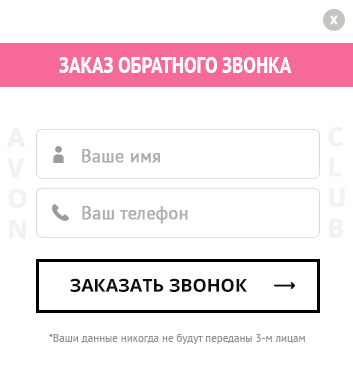
<style>
.page{position:relative;width:353px;height:383px;background:#ffffff}
.page>*{position:absolute;margin:0}
.t1{font:13px "Calibri-Bold";color:#ffffff;font-weight:bold}
.t2{font:23px "PTSans-NarrowBold";color:#ffffff;text-transform:uppercase}
.t3{font:25.4px "OpenSans-Bold";letter-spacing:-0.13em;color:#f2f2f2;font-weight:bold}
.t4{font:18px "PTSans-Regular";color:#aeaeae;font-weight:bold}
.t5{font:18px "OpenSans-Bold";color:#0e0e0e;text-transform:uppercase}
.t6{font:11px "PTSans-Regular";color:#919191}
</style>
<div class="page">
<p class="t1" style="left:330px;top:15px;width:8px;height:10px;opacity:0.88">Х</p>
<p class="t2" style="left:59px;top:57px;width:233px;height:16px">Заказ обратного звонка</p>
<p class="t3" style="left:7px;top:128px;width:20px;height:111px">A<br>V<br>O<br>N</p>
<p class="t3" style="left:328px;top:127px;width:17px;height:111px">C<br>L<br>U<br>B</p>
<p class="t4" style="left:82px;top:149px;width:78px;height:14px">Ваше имя</p>
<p class="t4" style="left:82px;top:206px;width:106px;height:18px">Ваш телефон</p>
<p class="t5" style="left:70px;top:278px;width:177px;height:14px">заказать звонок</p>
<p class="t6" style="left:49px;top:334px;width:256px;height:10px">*Ваши данные никогда не будут переданы 3-м лицам</p>
</div>
